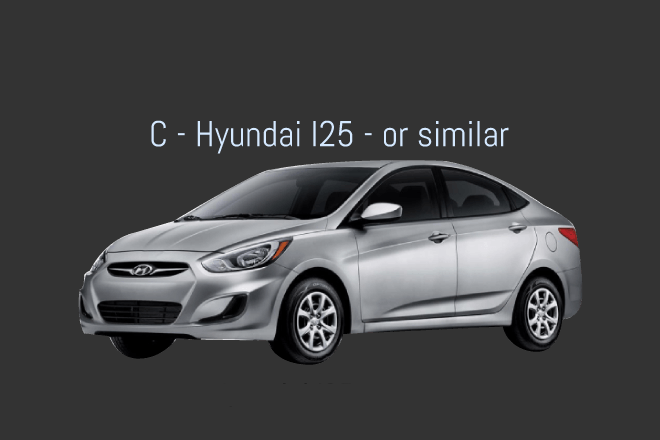
<style>
.page{position:relative;width:660px;height:440px;background:#333333}
.page>*{position:absolute;margin:0}
.t1{font:36px "Abel-Regular";color:#d5e9ff}
</style>
<div class="page">
<p class="t1" style="left:151px;top:120px;width:358px;height:34px">C - Hyundai I25 - or similar</p>
</div>
